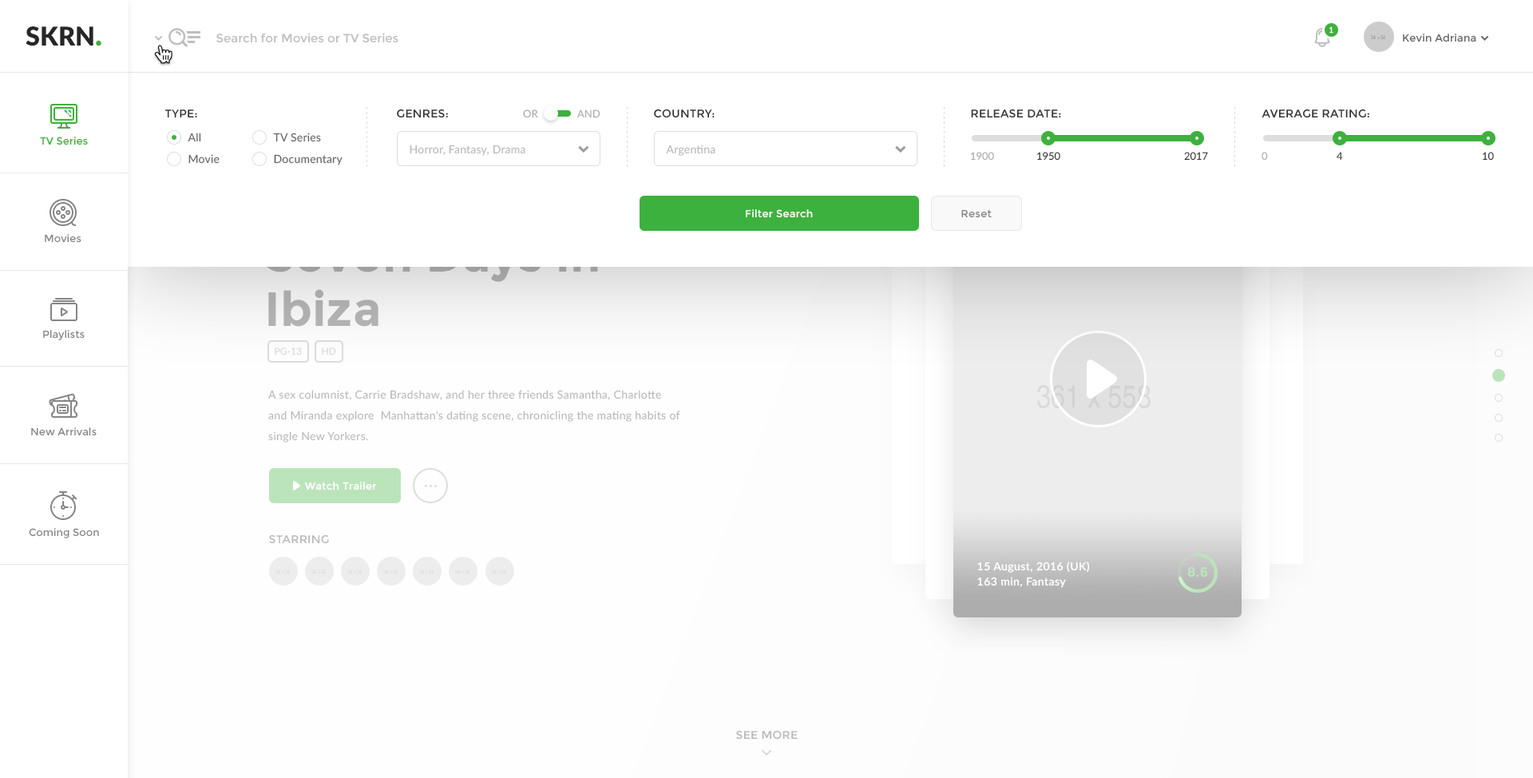
<style>
.page{position:relative;width:1533px;height:778px;background:#ffffff}
.page>*{position:absolute;margin:0}
.t1{font:25.9px "Lato-Black";color:#272727}
.t2{font:30.2px "Lato-Black";color:#3db13d}
.t3{font:8px "Lato-Semibold";color:#ffffff}
.t4{font:12px "Montserrat-Regular";color:#bfbfbf}
.t5{font:10.4px "Montserrat-Regular";letter-spacing:0.015em;color:#666666}
.t6{font:11.2px "Montserrat-Regular";letter-spacing:0.017em;color:#333333;text-transform:uppercase}
.t7{font:10.4px "Lato-Regular";color:#adadad;text-transform:uppercase}
.t8{font:10.4px "Montserrat-Regular";color:#3db13d}
.t9{font:11.2px "Lato-Regular";letter-spacing:0.015em;color:#666666}
.t10{font:11.2px "Lato-Regular";letter-spacing:0.015em;color:#bcbcbc}
.t11{font:10.4px "Lato-Regular";color:#333333;text-transform:uppercase}
.t12{font:10.4px "Lato-Regular";text-transform:uppercase}
.t13{font:10.4px "Montserrat-Regular";letter-spacing:0.02em;color:#ffffff}
.t14{font:10.4px "Montserrat-Regular";letter-spacing:0.02em;color:#858585}
.t15{font:10.4px "Montserrat-Regular";color:#848484}
</style>
<div class="page">
<p class="t1" style="left:26px;top:26px;width:75px;height:20px">SKRN<span class="t2">.</span></p>
<p class="t3" style="left:1330px;top:26px;width:4px;height:8px">1</p>
<p class="t4" style="left:216px;top:33px;width:182px;height:10px">Search for Movies or TV Series</p>
<p class="t5" style="left:1403px;top:34px;width:73px;height:8px">Kevin Adriana</p>
<p class="t6" style="left:165px;top:109px;width:32px;height:9px">type:</p>
<p class="t6" style="left:397px;top:109px;width:51px;height:9px">genres:</p>
<p class="t7" style="left:523px;top:109px;width:15px;height:9px">Or</p>
<p class="t7" style="left:577px;top:109px;width:23px;height:9px">And</p>
<p class="t6" style="left:654px;top:109px;width:61px;height:9px">country:</p>
<p class="t6" style="left:971px;top:109px;width:90px;height:9px">release date:</p>
<p class="t6" style="left:1262px;top:109px;width:107px;height:9px">average rating:</p>
<p class="t8" style="left:40px;top:137px;width:48px;height:8px">TV Series</p>
<p class="t9" style="left:188px;top:133px;width:13px;height:9px">All</p>
<p class="t9" style="left:273px;top:133px;width:48px;height:9px">TV Series</p>
<p class="t10" style="left:410px;top:145px;width:115px;height:11px">Horror, Fantasy, Drama</p>
<p class="t10" style="left:666px;top:145px;width:49px;height:11px">Argentina</p>
<p class="t9" style="left:188px;top:154px;width:32px;height:10px">Movie</p>
<p class="t9" style="left:274px;top:154px;width:69px;height:11px">Documentary</p>
<p class="t7" style="left:971px;top:152px;width:23px;height:9px">1900</p>
<p class="t11" style="left:1037px;top:152px;width:23px;height:9px">1950</p>
<p class="t11" style="left:1184px;top:152px;width:24px;height:9px">2017</p>
<p class="t7" style="left:1262px;top:152px;width:6px;height:9px">0</p>
<p class="t12" style="left:1337px;top:152px;width:6px;height:9px">4</p>
<p class="t11" style="left:1483px;top:152px;width:11px;height:9px">10</p>
<p class="t13" style="left:746px;top:209px;width:67px;height:9px">Filter Search</p>
<p class="t14" style="left:961px;top:209px;width:31px;height:9px">Reset</p>
<p class="t15" style="left:45px;top:234px;width:36px;height:9px">Movies</p>
<p class="t15" style="left:43px;top:330px;width:42px;height:10px">Playlists</p>
<p class="t15" style="left:31px;top:427px;width:66px;height:9px">New Arrivals</p>
<p class="t15" style="left:29px;top:528px;width:70px;height:10px">Coming Soon</p>
</div>
